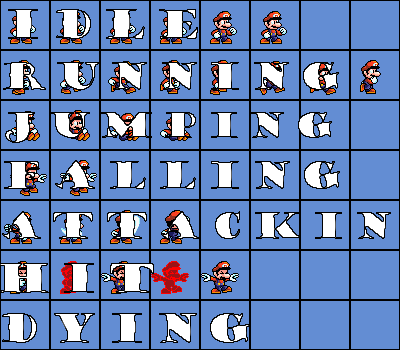
<style>
.page{position:relative;width:400px;height:350px;background:#638dd3}
.page>*{position:absolute;margin:0}
.t1{font:38.5px "GoudyStout";letter-spacing:0.2em;color:#ffffff}
.t2{font:36px "GoudyStout";letter-spacing:0.2em;color:#ffffff}
.t3{font:34px "GoudyStout";letter-spacing:0.2em;color:#ffffff}
.t4{font:36.5px "GoudyStout";letter-spacing:0.2em;color:#ffffff}
</style>
<div class="page">
<p class="t1" style="left:8px;top:9px;width:190px;height:30px">IDLE</p>
<p class="t2" style="left:3px;top:62px;width:336px;height:28px">running</p>
<p class="t3" style="left:5px;top:112px;width:327px;height:31px">jumping</p>
<p class="t4" style="left:4px;top:160px;width:336px;height:29px">falling</p>
<p class="t1" style="left:2px;top:313px;width:248px;height:30px">dying</p>
</div>
